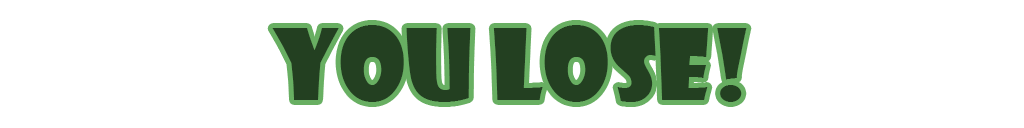
<style>
.page{position:relative;width:1024px;height:128px;background:#ffffff}
.page>*{position:absolute;margin:0}
.t1{font:96px "ShowcardGothic-Reg";color:#234021}
</style>
<div class="page">
<p class="t1" style="left:272px;top:25px;width:475px;height:77px">YOU LOSE!</p>
</div>
